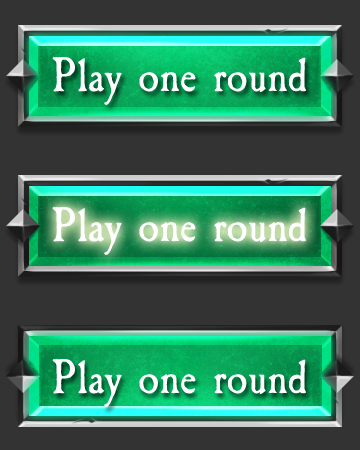
<style>
.page{position:relative;width:360px;height:450px;background:#333333}
.page>*{position:absolute;margin:0}
.t1{font:50.7px "CaslonAntique";color:#ffffff}
</style>
<div class="page">
<p class="t1" style="left:52px;top:57px;width:254px;height:48px">Play one round</p>
<p class="t1" style="left:52px;top:207px;width:254px;height:48px">Play one round</p>
<p class="t1" style="left:52px;top:359px;width:254px;height:48px">Play one round</p>
</div>
